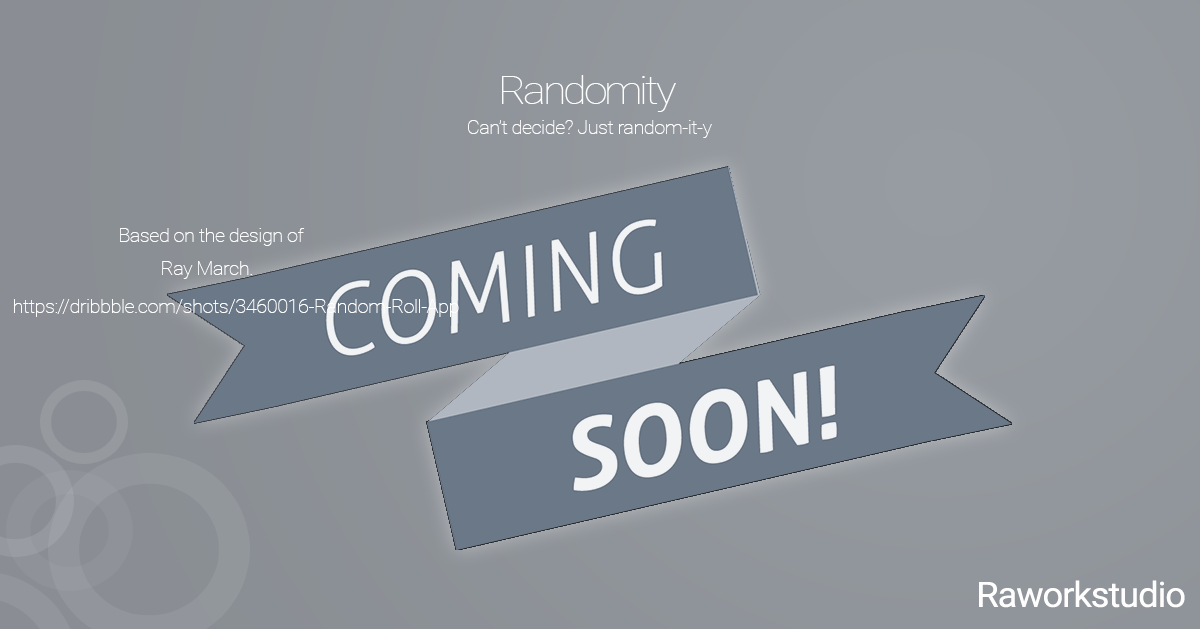
<style>
.page{position:relative;width:1200px;height:629px}
.page>*{position:absolute;margin:0}
.t1{font:38.8px "Roboto-Thin";letter-spacing:-0.07em;color:#fffefe;scale:1.1 1}
.t2{font:19.4px "Roboto-Thin";letter-spacing:-0.03em;color:#fffefe;scale:1.04 1}
.t3{font:19.2px/0px "Roboto-Thin";letter-spacing:-0.03em;color:#fffefe;scale:1.05 1}
.t4{font:19.4px/33.3px "Roboto-Thin";letter-spacing:-0.03em;color:#fffefe;scale:1.04 1}
.t5{font:34.9px "Roboto-Regular";letter-spacing:-0.03em;color:#fffefe;scale:1.04 1}
</style>
<div class="page">
<p class="t1" style="left:502px;top:75px;width:174px;height:37px">Randomity</p>
<p class="t2" style="left:468px;top:120px;width:244px;height:18px">Can’t decide? Just random-it-y</p>
<p class="t3" style="left:120px;top:228px;width:185px;height:51px">Based on the design of  <br>          Ray March<span class="t4">.</span></p>
<p class="t2" style="left:14px;top:299px;width:445px;height:18px">https://dribbble.com/shots/3460016-Random-Roll-App</p>
<p class="t5" style="left:979px;top:580px;width:206px;height:28px">Raworkstudio</p>
</div>
